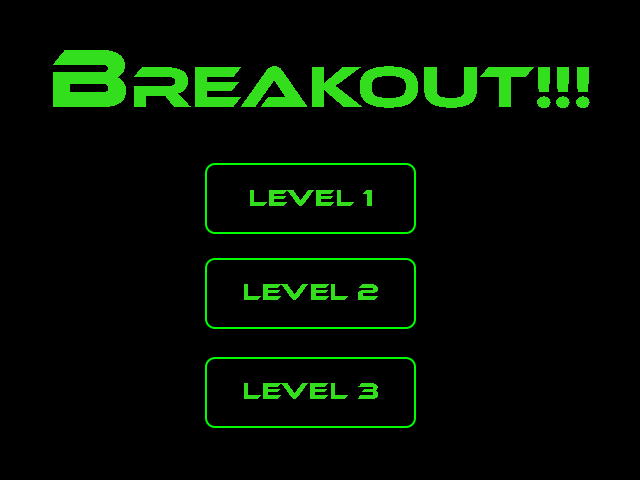
<style>
.page{position:relative;width:640px;height:480px;background:#000000}
.page>*{position:absolute;margin:0}
.t1{font:60px "EthnocentricRg-Regular";color:#33df1c}
.t2{font:85px "EthnocentricRg-Regular";color:#33df1c}
.t3{font:24px "EthnocentricRg-Regular";color:#33df1c}
</style>
<div class="page">
<p class="t1" style="left:53px;top:50px;width:537px;height:58px"><span class="t2">B</span>reakout!!!</p>
<p class="t3" style="left:250px;top:190px;width:122px;height:16px">Level 1</p>
<p class="t3" style="left:244px;top:284px;width:134px;height:16px">level 2</p>
<p class="t3" style="left:244px;top:383px;width:134px;height:16px">level 3</p>
</div>
